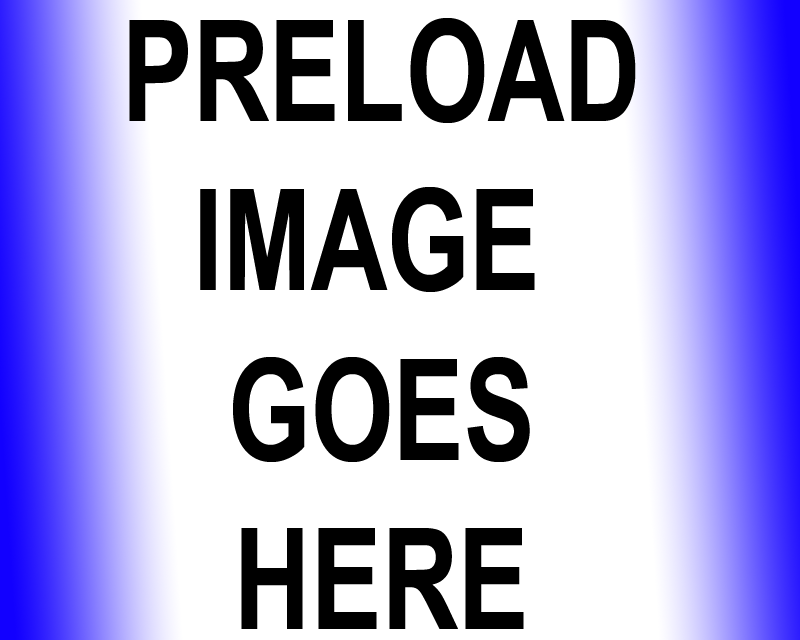
<style>
.page{position:relative;width:800px;height:640px;background:#ffffff}
.page>*{position:absolute;margin:0}
.t1{font:141.1px "Arial-BoldMT";color:#000000;scale:0.75 1}
</style>
<div class="page">
<p class="t1" style="left:129px;top:18px;width:507px;height:611px;text-align:center">PRELOAD<br>IMAGE <br>GOES<br>HERE</p>
</div>
